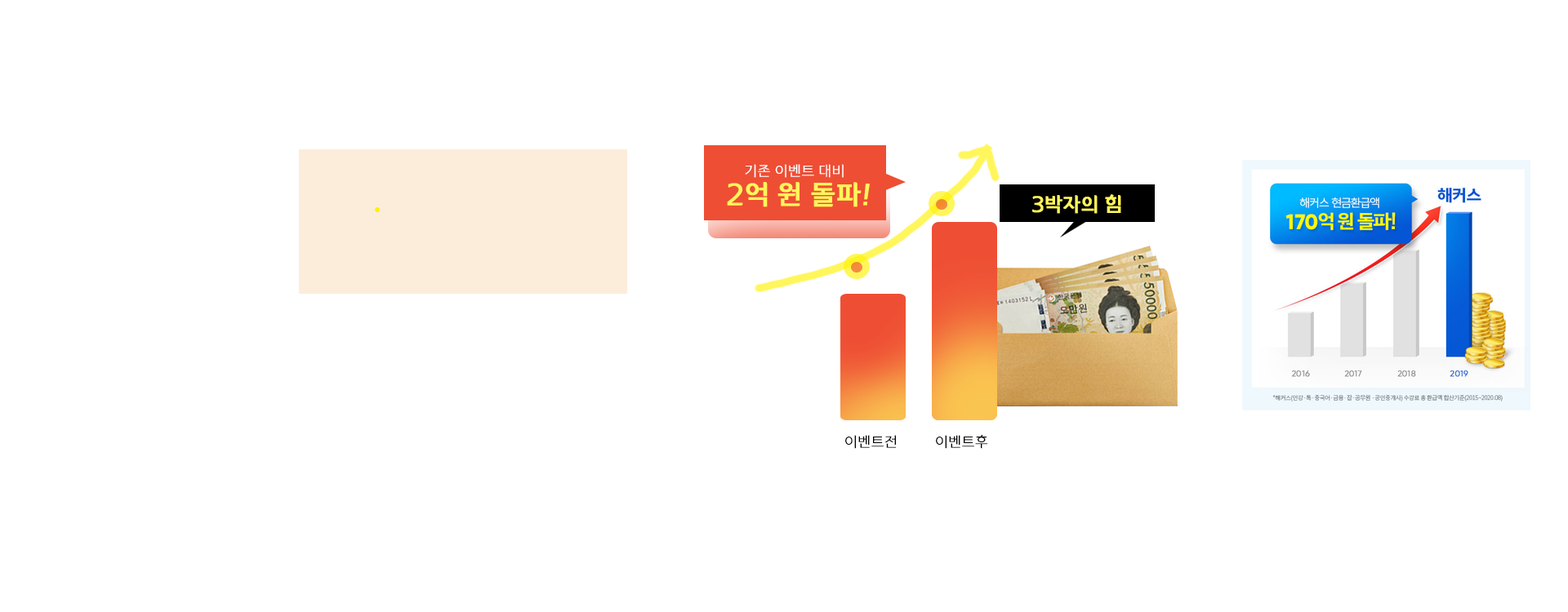
<style>
.page{position:relative;width:1568px;height:612px;background:#ffffff}
.page>*{position:absolute;margin:0}
.t1{font:15.7px "YiSunShinDotumL";letter-spacing:-0.02em;color:#ffffff;font-weight:bold}
.t2{font:29.9px "YiSunShinDotumM";letter-spacing:-0.02em;color:#fff65c;font-weight:bold}
.t3{font:21.8px "YiSunShinDotumM";letter-spacing:-0.02em;color:#fff65c;font-weight:bold}
.t4{font:15.7px "YiSunShinDotumL";letter-spacing:-0.02em;color:#000000;font-weight:bold}
</style>
<div class="page">
<p class="t1" style="left:745px;top:164px;width:99px;height:14px">기존 이벤트 대비</p>
<p class="t2" style="left:727px;top:182px;width:143px;height:25px">2억 원 돌파!</p>
<p class="t3" style="left:1032px;top:194px;width:89px;height:20px">3박자의 힘</p>
<p class="t4" style="left:845px;top:435px;width:52px;height:14px">이벤트전</p>
<p class="t4" style="left:936px;top:435px;width:52px;height:14px">이벤트후</p>
</div>
